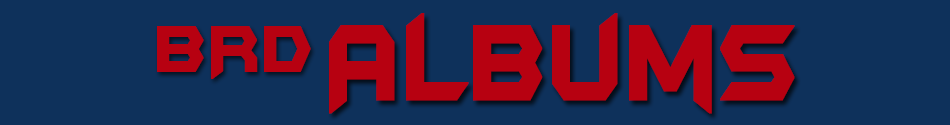
<style>
.page{position:relative;width:950px;height:125px;background:#0e315b}
.page>*{position:absolute;margin:0}
.t1{font:125px "BatmanForeverAlternate";color:#b70111;font-weight:bold;scale:0.71 1}
.t2{font:75.9px "BatmanForeverAlternate";color:#b70111;font-weight:bold;scale:0.78 1}
</style>
<div class="page">
<p class="t1" style="left:329px;top:13px;width:466px;height:101px">Albums</p>
<p class="t2" style="left:157px;top:26px;width:154px;height:53px">BRD</p>
</div>
